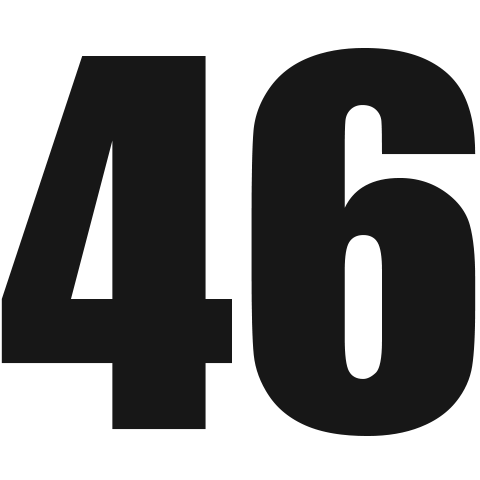
<style>
.page{position:relative;width:480px;height:480px;background:#171717}
.page>*{position:absolute;margin:0}
.t1{font:472.3px "Impact";color:#171717}
</style>
<div class="page">
<p class="t1" style="left:1px;top:48px;width:475px;height:388px">46</p>
</div>
